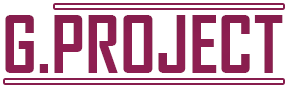
<style>
.page{position:relative;width:287px;height:88px;background:#ffffff}
.page>*{position:absolute;margin:0}
.t1{font:75.5px "AgencyFB-Bold";color:#9c2259}
</style>
<div class="page">
<p class="t1" style="left:5px;top:15px;width:278px;height:58px">G.PROJECT</p>
</div>
